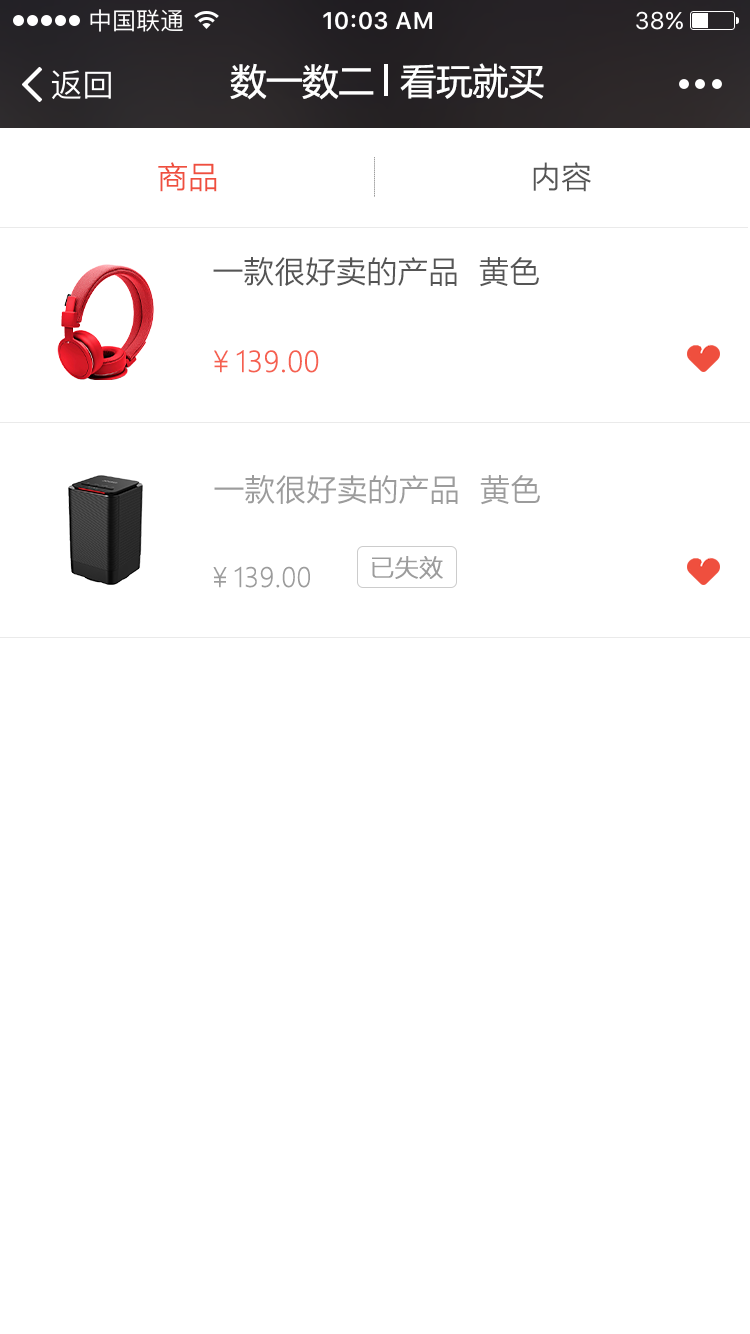
<style>
.page{position:relative;width:750px;height:1334px;background:#ffffff}
.page>*{position:absolute;margin:0}
.t1{font:36px "MicrosoftYaHei";color:#ffffff}
.t2{font:30px "MicrosoftYaHeiLight";color:#ef4f3e;font-weight:bold}
.t3{font:30px "MicrosoftYaHeiLight";color:#555555;font-weight:bold}
.t4{font:28px "MicrosoftYaHeiLight";color:#f56050;font-weight:bold}
.t5{font:30px "MicrosoftYaHeiLight";color:#9c9c9c;font-weight:bold}
.t6{font:24px "MicrosoftYaHeiLight";color:#9c9c9c;font-weight:bold}
.t7{font:26px "MicrosoftYaHeiLight";color:#9c9c9c;font-weight:bold}
</style>
<div class="page">
<p class="t1" style="left:230px;top:63px;width:144px;height:37px">数一数二</p>
<p class="t1" style="left:400px;top:63px;width:144px;height:36px">看玩就买</p>
<p class="t2" style="left:158px;top:162px;width:59px;height:30px">商品</p>
<p class="t3" style="left:533px;top:162px;width:58px;height:30px">内容</p>
<p class="t3" style="left:213px;top:257px;width:326px;height:30px">一款很好卖的产品  黄色</p>
<p class="t4" style="left:214px;top:350px;width:105px;height:23px">￥139.00</p>
<p class="t5" style="left:214px;top:475px;width:326px;height:30px">一款很好卖的产品  黄色</p>
<p class="t6" style="left:372px;top:556px;width:71px;height:23px">已失效</p>
<p class="t7" style="left:213px;top:566px;width:97px;height:22px">￥139.00</p>
</div>
